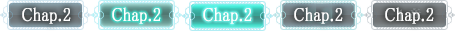
<style>
.page{position:relative;width:455px;height:31px}
.page>*{position:absolute;margin:0}
.t1{font:19px "MS-PMincho";color:#ffffff;font-weight:bold;scale:0.84 1}
</style>
<div class="page">
<p class="t1" style="left:22px;top:7px;width:49px;height:17px">Chap.2</p>
<p class="t1" style="left:112px;top:7px;width:49px;height:17px">Chap.2</p>
<p class="t1" style="left:203px;top:7px;width:49px;height:17px">Chap.2</p>
<p class="t1" style="left:294px;top:7px;width:49px;height:17px">Chap.2</p>
<p class="t1" style="left:385px;top:7px;width:49px;height:17px">Chap.2</p>
</div>
